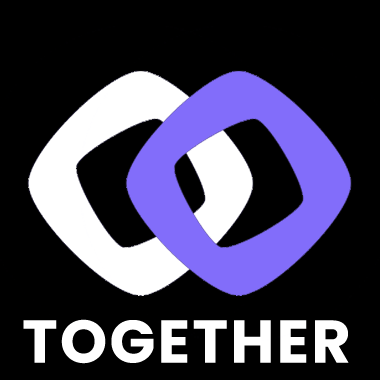
<style>
.page{position:relative;width:380px;height:380px;background:#000000}
.page>*{position:absolute;margin:0}
.t1{font:60px "Poppins-Bold";letter-spacing:0.04em;color:#ffffff}
</style>
<div class="page">
<p class="t1" style="left:23px;top:319px;width:326px;height:45px">TOGETHER</p>
</div>
